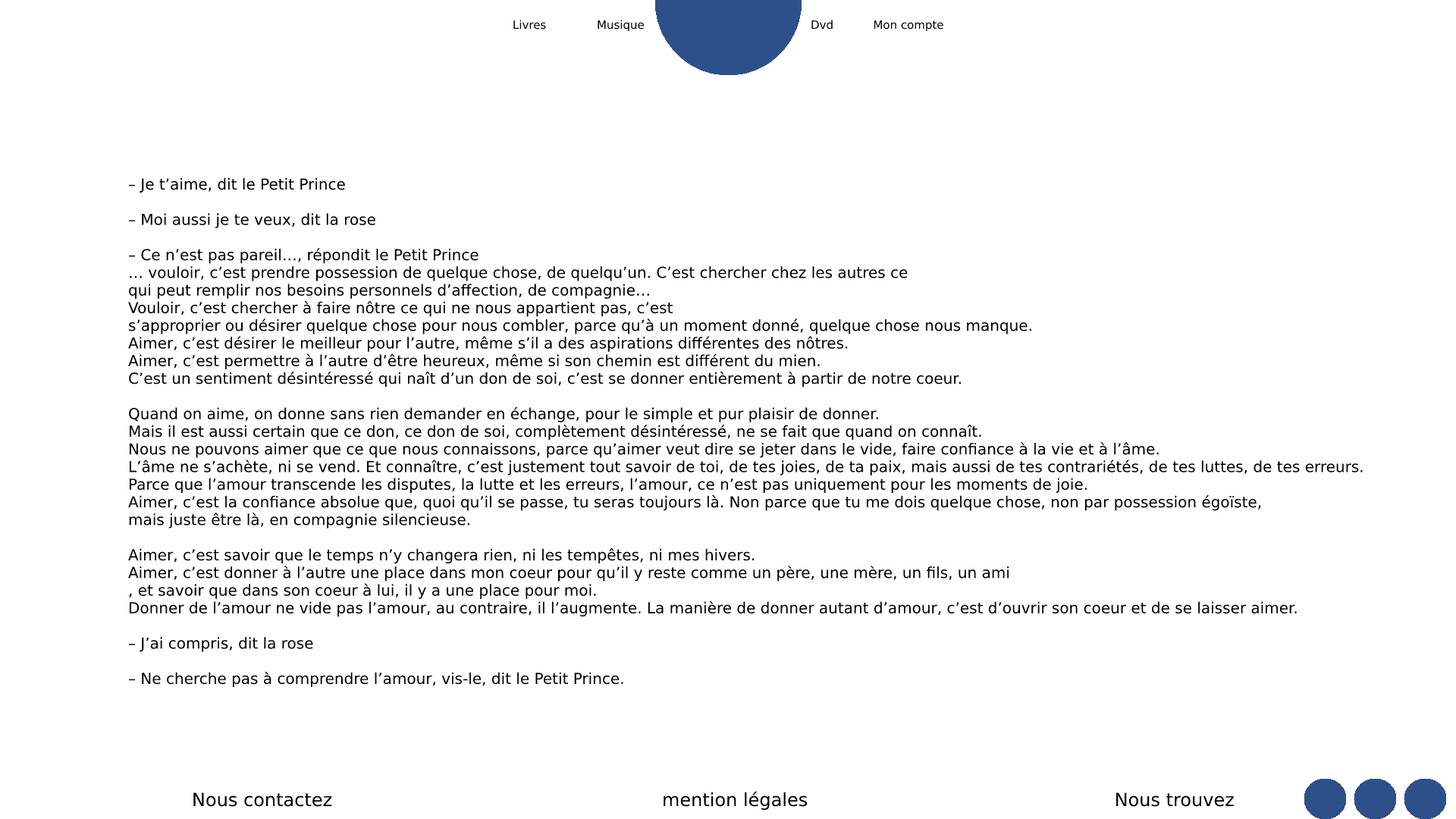
<style>
.page{position:relative;width:1456px;height:819px;background:#ffffff}
.page>*{position:absolute;margin:0}
.t1{font:15.2px "DejaVuSans";color:#000000}
</style>
<div class="page">
<p class="t1" style="left:128px;top:177px;width:1235px;height:511px">– Je t’aime, dit le Petit Prince<br><br>– Moi aussi je te veux, dit la rose<br><br>– Ce n’est pas pareil…, répondit le Petit Prince<br>… vouloir, c’est prendre possession de quelque chose, de quelqu’un. C’est chercher chez les autres ce <br>qui peut remplir nos besoins personnels d’affection, de compagnie… <br>Vouloir, c’est chercher à faire nôtre ce qui ne nous appartient pas, c’est <br>s’approprier ou désirer quelque chose pour nous combler, parce qu’à un moment donné, quelque chose nous manque.<br>Aimer, c’est désirer le meilleur pour l’autre, même s’il a des aspirations différentes des nôtres.<br>Aimer, c’est permettre à l’autre d’être heureux, même si son chemin est différent du mien. <br>C’est un sentiment désintéressé qui naît d’un don de soi, c’est se donner entièrement à partir de notre coeur.<br><br>Quand on aime, on donne sans rien demander en échange, pour le simple et pur plaisir de donner. <br>Mais il est aussi certain que ce don, ce don de soi, complètement désintéressé, ne se fait que quand on connaît. <br>Nous ne pouvons aimer que ce que nous connaissons, parce qu’aimer veut dire se jeter dans le vide, faire confiance à la vie et à l’âme. <br>L’âme ne s’achète, ni se vend. Et connaître, c’est justement tout savoir de toi, de tes joies, de ta paix, mais aussi de tes contrariétés, de tes luttes, de tes erreurs. <br>Parce que l’amour transcende les disputes, la lutte et les erreurs, l’amour, ce n’est pas uniquement pour les moments de joie.<br>Aimer, c’est la confiance absolue que, quoi qu’il se passe, tu seras toujours là. Non parce que tu me dois quelque chose, non par possession égoïste, <br>mais juste être là, en compagnie silencieuse.<br><br>Aimer, c’est savoir que le temps n’y changera rien, ni les tempêtes, ni mes hivers.<br>Aimer, c’est donner à l’autre une place dans mon coeur pour qu’il y reste comme un père, une mère, un fils, un ami<br>, et savoir que dans son coeur à lui, il y a une place pour moi.<br>Donner de l’amour ne vide pas l’amour, au contraire, il l’augmente. La manière de donner autant d’amour, c’est d’ouvrir son coeur et de se laisser aimer.<br><br>– J’ai compris, dit la rose<br><br>– Ne cherche pas à comprendre l’amour, vis-le, dit le Petit Prince.</p>
</div>
